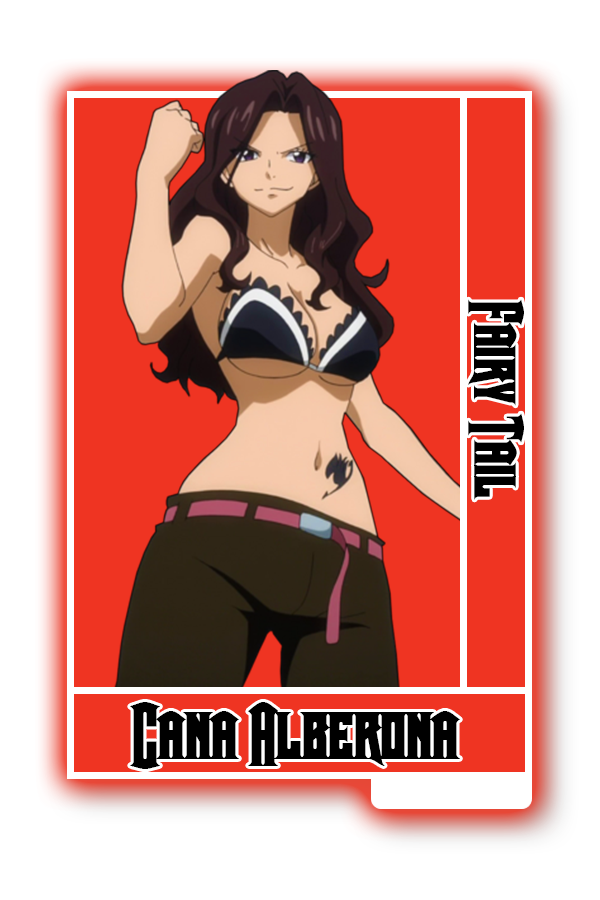
<style>
.page{position:relative;width:600px;height:900px;background:#ffffff}
.page>*{position:absolute;margin:0}
.t1{font:61.5px "Crown-Title";color:#000000}
.t2{font:70.1px "Crown-Title";color:#000000}
</style>
<div class="page">
<p class="t1" style="left:468px;top:299px;width:56px;height:201px;rotate:90deg">Fairy Tail</p>
<p class="t2" style="left:130px;top:702px;width:330px;height:67px">Cana Alberona</p>
</div>
